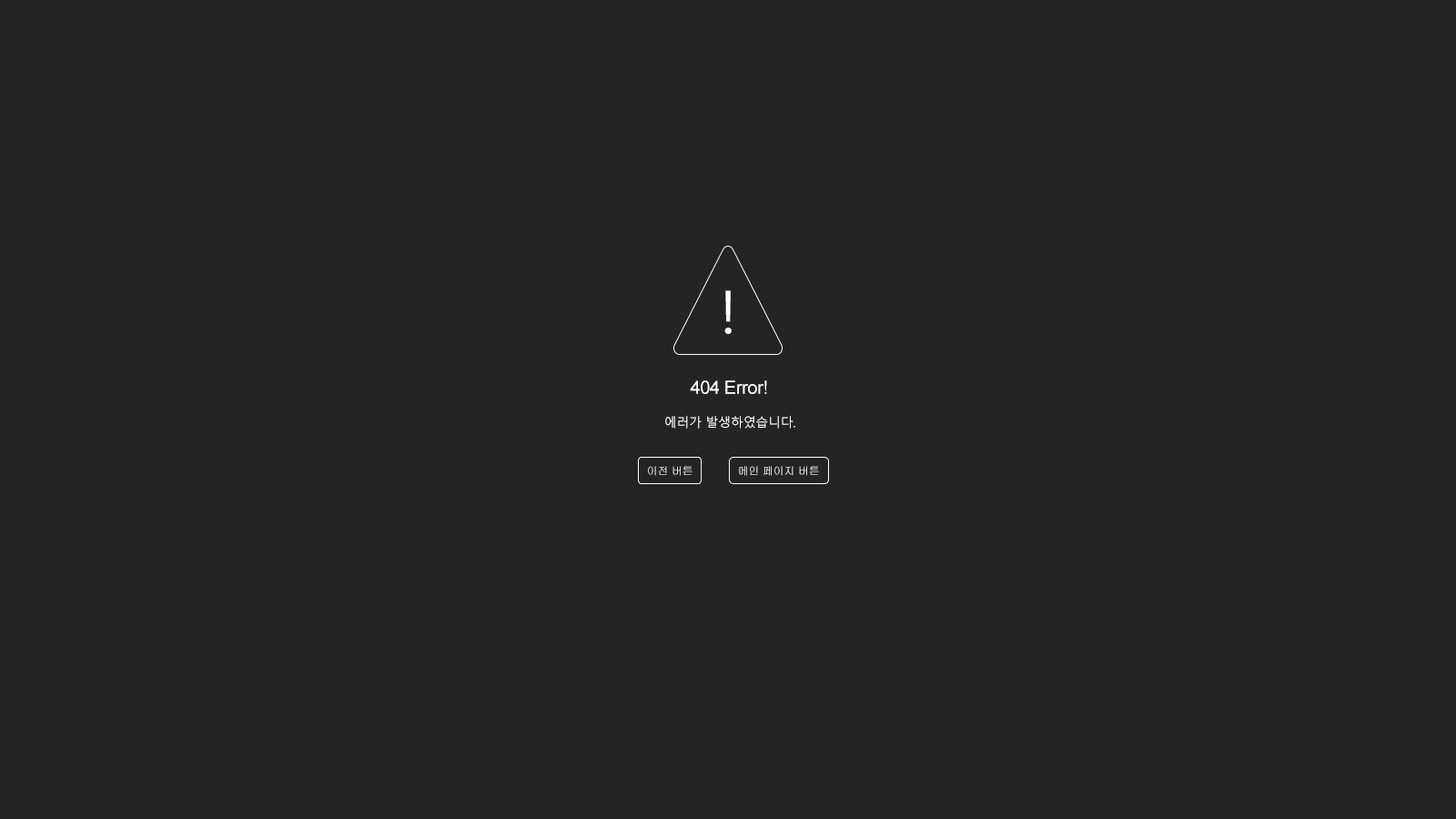
<style>
.page{position:relative;width:1456px;height:819px;background:#242424}
.page>*{position:absolute;margin:0}
.t1{font:59.1px "MalgunGothic";letter-spacing:-0.02em;color:#ffffff}
.t2{font:18.2px "ArialMT";letter-spacing:-0.02em;color:#ffffff}
.t3{font:12.7px "MalgunGothic";letter-spacing:-0.02em;color:#ffffff}
.t4{font:10.9px "Gulim";letter-spacing:-0.02em}
</style>
<div class="page">
<p class="t1" style="left:724px;top:290px;width:8px;height:44px">!</p>
<p class="t2" style="left:690px;top:380px;width:77px;height:14px">404 Error!</p>
<p class="t3" style="left:665px;top:416px;width:130px;height:13px">에러가 발생하였습니다.</p>
<p class="t4" style="left:648px;top:466px;width:45px;height:10px">이전 버튼</p>
<p class="t4" style="left:739px;top:466px;width:80px;height:10px">메인 페이지 버튼</p>
</div>
